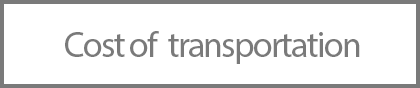
<style>
.page{position:relative;width:420px;height:88px;background:#ffffff}
.page>*{position:absolute;margin:0}
.t1{font:36px "MyriadPro-Regular";letter-spacing:-0.05em;color:#7a7a7a}
</style>
<div class="page">
<p class="t1" style="left:65px;top:31px;width:295px;height:33px">Cost of  transportation</p>
</div>
